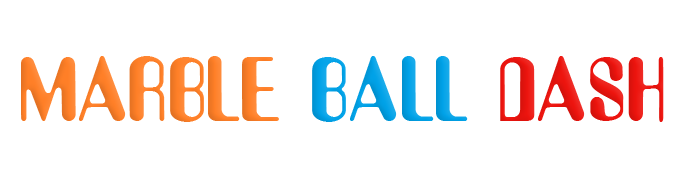
<style>
.page{position:relative;width:684px;height:179px;background:#ffffff}
.page>*{position:absolute;margin:0}
.t1{font:80px "Asimov";color:#ff7f27}
.t2{font:80px "Asimov";color:#00a2e8}
.t3{font:80px "Asimov";color:#ed140e}
</style>
<div class="page">
<p class="t1" style="left:21px;top:56px;width:643px;height:66px">MARBLE <span class="t2">BALL </span><span class="t3">DASH</span></p>
</div>
